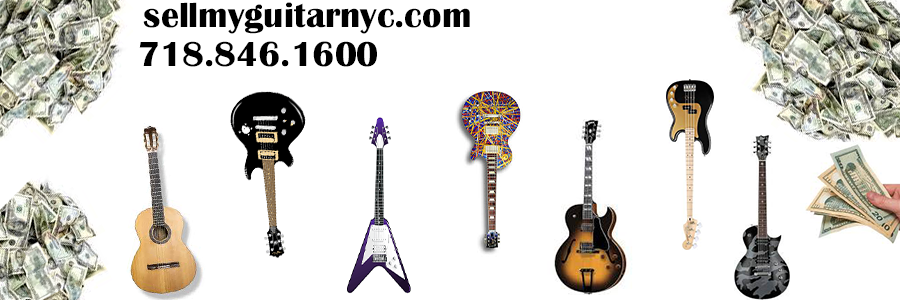
<style>
.page{position:relative;width:900px;height:300px;background:#ffffff}
.page>*{position:absolute;margin:0}
.t1{font:36px "BritannicBold";color:#000000}
</style>
<div class="page">
<p class="t1" style="left:143px;top:2px;width:327px;height:32px">sellmyguitarnyc.com</p>
<p class="t1" style="left:139px;top:41px;width:238px;height:26px">718.846.1600</p>
</div>
